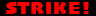
<style>
.page{position:relative;width:96px;height:16px;background:#000000}
.page>*{position:absolute;margin:0}
.t1{font:17.8px "Skia_2.919wght";letter-spacing:0.075em;color:#ff0000;scale:1.03 1}
</style>
<div class="page">
<p class="t1" style="left:6px;top:2px;width:83px;height:12px">STRIKE!</p>
</div>
